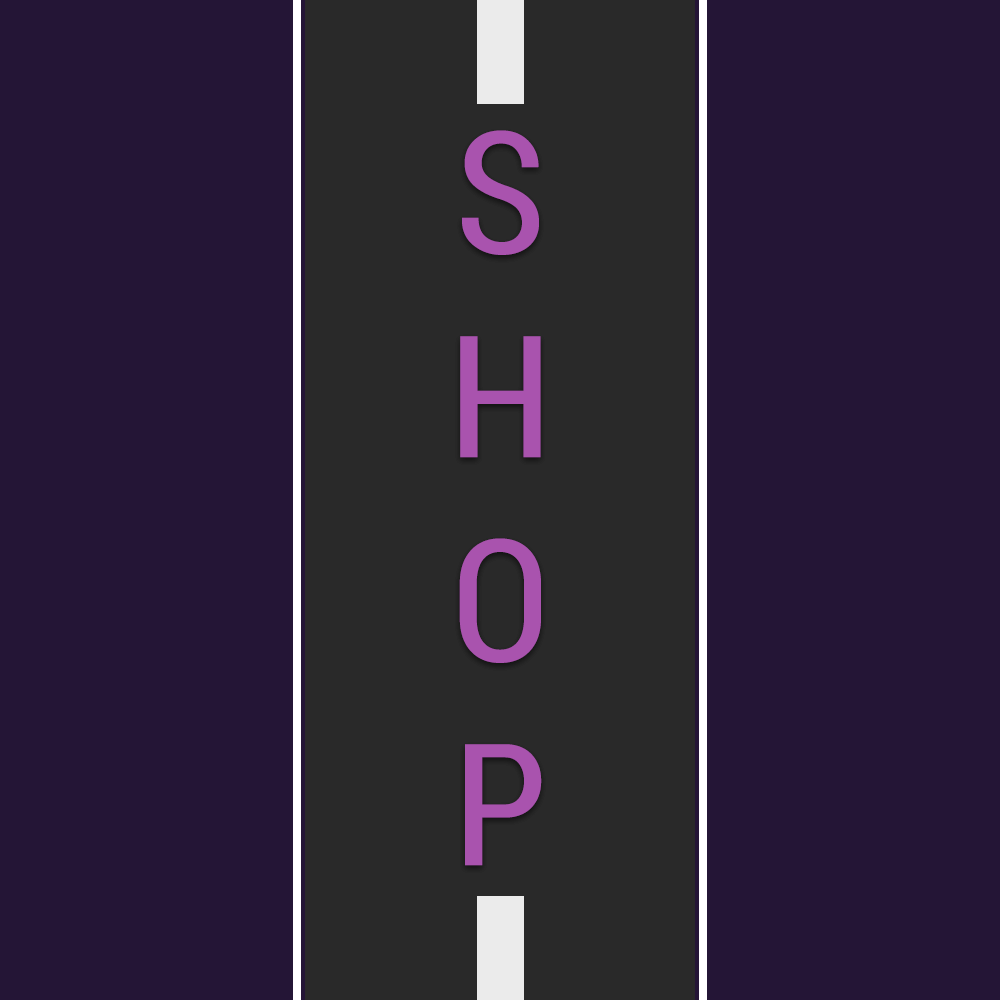
<style>
.page{position:relative;width:1000px;height:1000px;background:#241536}
.page>*{position:absolute;margin:0}
.t1{font:170px "RobotoCondensed-Regular";color:#a953ae}
</style>
<div class="page">
<p class="t1" style="left:459px;top:130px;width:83px;height:736px;text-align:center">S<br>H<br>O<br>P</p>
</div>
